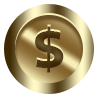
<style>
.page{position:relative;width:98px;height:98px;background:#ffffff}
.page>*{position:absolute;margin:0}
.t1{font:53.7px "Humanist777BT-BlackB";color:#4f3713}
</style>
<div class="page">
<p class="t1" style="left:35px;top:26px;width:29px;height:47px">$</p>
</div>
